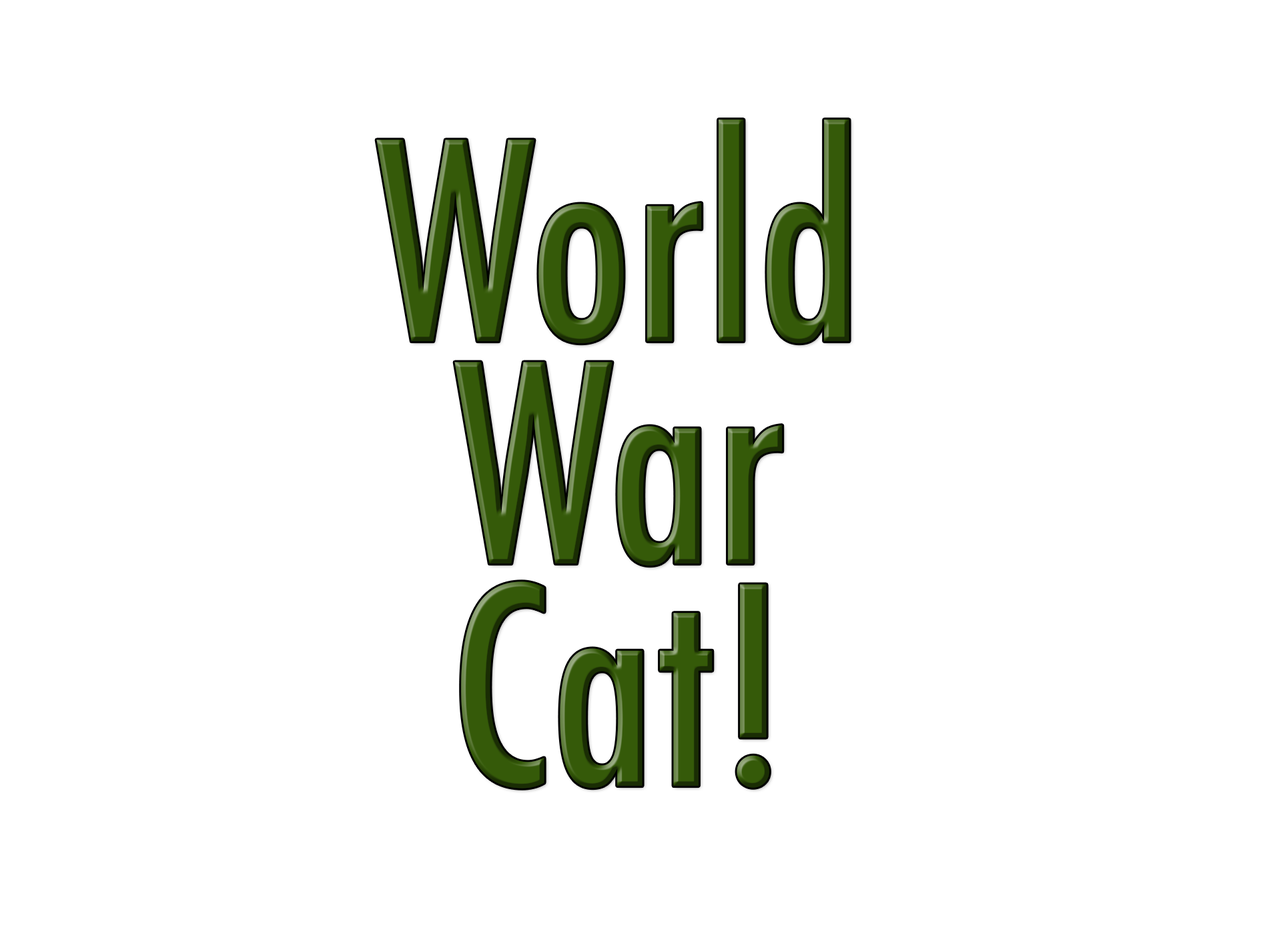
<style>
.page{position:relative;width:1261px;height:946px;background:#ffffff}
.page>*{position:absolute;margin:0}
.t1{font:266.9px/222.4px "Futura-CondensedMedium"}
</style>
<div class="page">
<p class="t1" style="left:376px;top:119px;width:473px;height:669px;text-align:center">World<br>War<br>Cat!</p>
</div>
